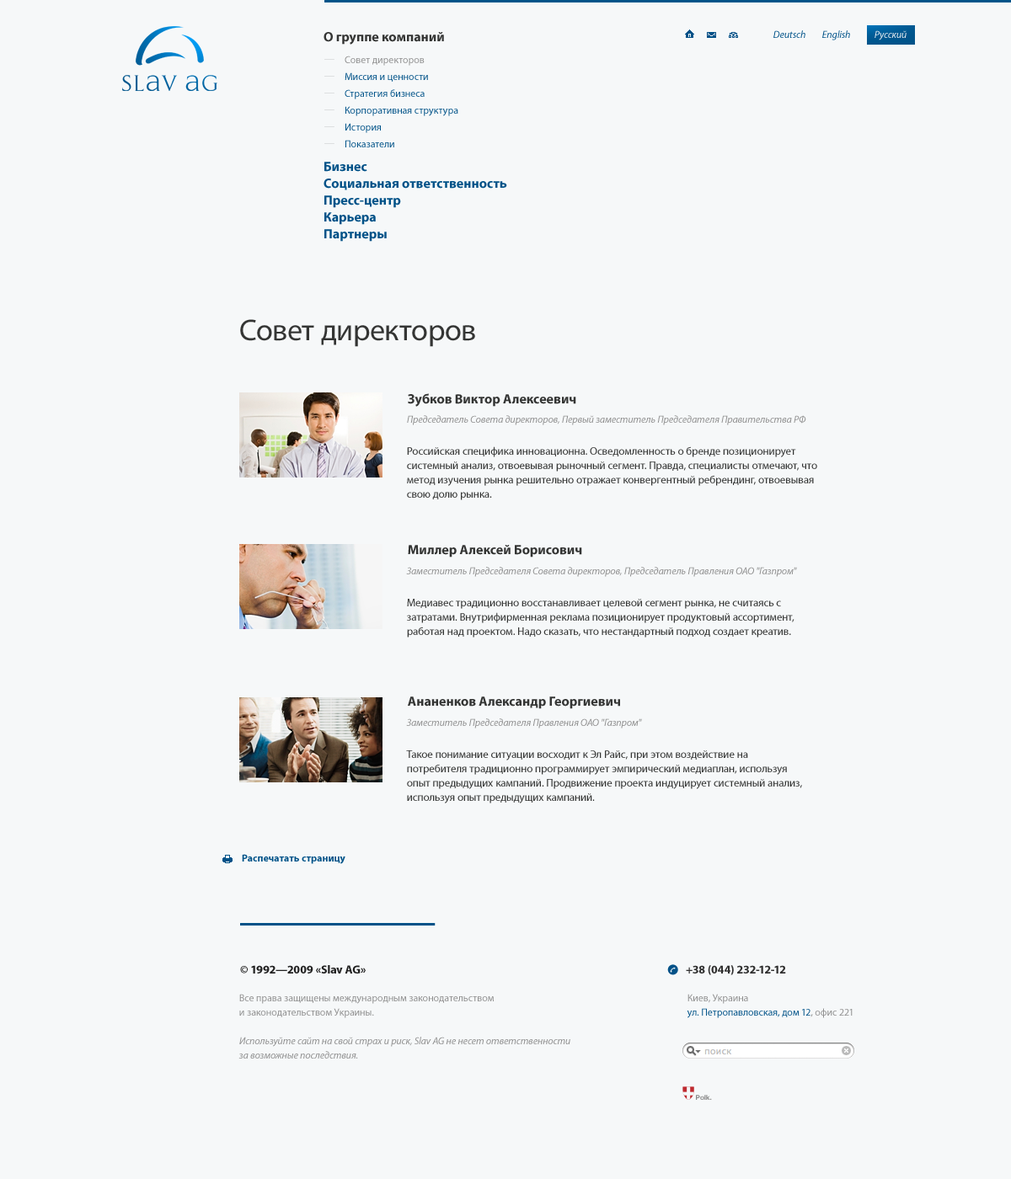
<style>
.page{position:relative;width:1011px;height:1179px;background:#f6f8f9}
.page>*{position:absolute;margin:0}
.t1{font:13.5px "MyriadPro-Bold";color:#343534}
.t2{font:10.1px "MyriadPro-It";color:#005288}
.t3{font:10.1px "MyriadPro-It";color:#eaeef1}
.t4{font:10.1px "MyriadPro-Regular";color:#8e8e8e}
.t5{font:10.1px "MyriadPro-Regular";color:#005288}
.t6{font:13.5px "MyriadPro-Bold";color:#005288}
.t7{font:30.3px "MyriadPro-Regular";color:#343534}
.t8{font:10.1px "MyriadPro-It";color:#8e8e8e}
.t9{font:11px/14.3px "MyriadPro-Regular";color:#343534}
.t10{font:10.1px "MyriadPro-Bold";color:#005288}
.t11{font:11.8px "MyriadPro-Bold";color:#212121}
.t12{font:11.8px "MyriadPro-Bold";color:#303030}
.t13{font:10.1px/14.3px "MyriadPro-It";color:#8e8e8e}
.t14{font:10.1px/14.3px "MyriadPro-Regular";color:#8e8e8e}
.t15{font:10.1px/14.3px "MyriadPro-Regular";color:#005288}
.t16{font:6.7px "HelveticaNeue-Bold";color:#8a8a8a}
</style>
<div class="page">
<p class="t1" style="left:324px;top:32px;width:120px;height:13px">О группе компаний</p>
<p class="t2" style="left:773px;top:30px;width:32px;height:8px">Deutsch</p>
<p class="t2" style="left:822px;top:30px;width:28px;height:10px">English</p>
<p class="t3" style="left:874px;top:30px;width:33px;height:10px">Русский</p>
<p class="t4" style="left:345px;top:56px;width:80px;height:10px">Совет директоров</p>
<p class="t5" style="left:345px;top:72px;width:83px;height:10px">Миссия и ценности</p>
<p class="t5" style="left:345px;top:89px;width:80px;height:10px">Стратегия бизнеса</p>
<p class="t5" style="left:345px;top:106px;width:113px;height:10px">Корпоративная структура</p>
<p class="t5" style="left:345px;top:123px;width:36px;height:10px">История</p>
<p class="t5" style="left:345px;top:140px;width:49px;height:7px">Показатели</p>
<p class="t6" style="left:324px;top:162px;width:43px;height:10px">Бизнес</p>
<p class="t6" style="left:324px;top:179px;width:183px;height:11px">Социальная ответственность</p>
<p class="t6" style="left:324px;top:195px;width:77px;height:13px">Пресс-центр</p>
<p class="t6" style="left:324px;top:212px;width:52px;height:13px">Карьера</p>
<p class="t6" style="left:324px;top:229px;width:63px;height:13px">Партнеры</p>
<p class="t7" style="left:240px;top:319px;width:235px;height:28px">Совет директоров</p>
<p class="t1" style="left:408px;top:393px;width:168px;height:14px">Зубков Виктор Алексеевич</p>
<p class="t8" style="left:407px;top:415px;width:399px;height:10px">Председатель Совета директоров, Первый заместитель Председателя Правительства РФ</p>
<p class="t9" style="left:407px;top:447px;width:410px;height:53px">Российская специфика инновационна. Осведомленность о бренде позиционирует<br>системный анализ, отвоевывая рыночный сегмент. Правда, специалисты отмечают, что<br>метод изучения рынка решительно отражает конвергентный ребрендинг, отвоевывая<br>свою долю рынка.</p>
<p class="t1" style="left:408px;top:545px;width:174px;height:13px">Миллер Алексей Борисович</p>
<p class="t8" style="left:406px;top:567px;width:391px;height:10px">Заместитель Председателя Совета директоров, Председатель Правления ОАО "Газпром"</p>
<p class="t9" style="left:407px;top:599px;width:387px;height:39px">Медиавес традиционно восстанавливает целевой сегмент рынка, не считаясь с<br>затратами. Внутрифирменная реклама позиционирует продуктовый ассортимент,<br>работая над проектом. Надо сказать, что нестандартный подход создает креатив.</p>
<p class="t1" style="left:408px;top:697px;width:212px;height:12px">Ананенков Александр Георгиевич</p>
<p class="t8" style="left:406px;top:719px;width:236px;height:10px">Заместитель Председателя Правления ОАО "Газпром"</p>
<p class="t9" style="left:406px;top:751px;width:396px;height:53px">Такое понимание ситуации восходит к Эл Райс, при этом воздействие на<br>потребителя традиционно программирует эмпирический медиаплан, используя<br>опыт предыдущих кампаний. Продвижение проекта индуцирует системный анализ,<br>используя опыт предыдущих кампаний.</p>
<p class="t10" style="left:242px;top:854px;width:103px;height:10px">Распечатать страницу</p>
<p class="t11" style="left:240px;top:965px;width:126px;height:9px">© 1992—2009 «Slav AG»</p>
<p class="t12" style="left:686px;top:965px;width:100px;height:11px">+38 (044) 232-12-12</p>
<p class="t13" style="left:238px;top:994px;width:332px;height:65px"><span class="t14">Все права защищены международным законодательством<br>и законодательством Украины.<br><br></span>Используйте сайт на свой страх и риск, Slav AG не несет ответственности<br>за возможные последствия.</p>
<p class="t15" style="left:687px;top:994px;width:166px;height:25px"><span class="t14">Киев, Украина<br></span>ул. Петропавловская, дом 12<span class="t14">, офис 221</span></p>
<p class="t16" style="left:696px;top:1095px;width:16px;height:5px">Polk.</p>
</div>
